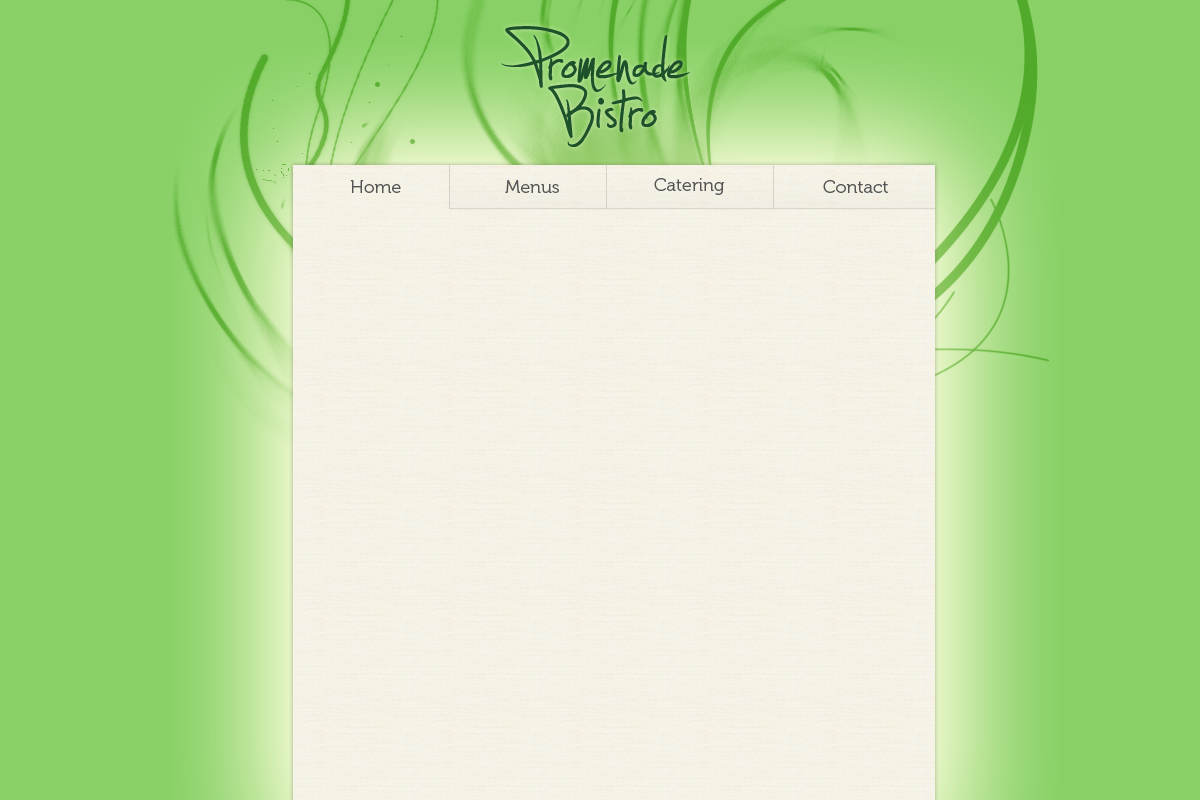
<style>
.page{position:relative;width:1200px;height:800px;background:#89d167}
.page>*{position:absolute;margin:0}
.t1{font:18px "Museo-300";color:#545454}
.t2{font:18px "Museo-300";color:#555555}
</style>
<div class="page">
<p class="t1" style="left:350px;top:180px;width:51px;height:13px">Home</p>
<p class="t2" style="left:505px;top:180px;width:54px;height:13px">Menus</p>
<p class="t2" style="left:654px;top:178px;width:71px;height:17px">Catering</p>
<p class="t2" style="left:823px;top:180px;width:65px;height:13px">Contact</p>
</div>
